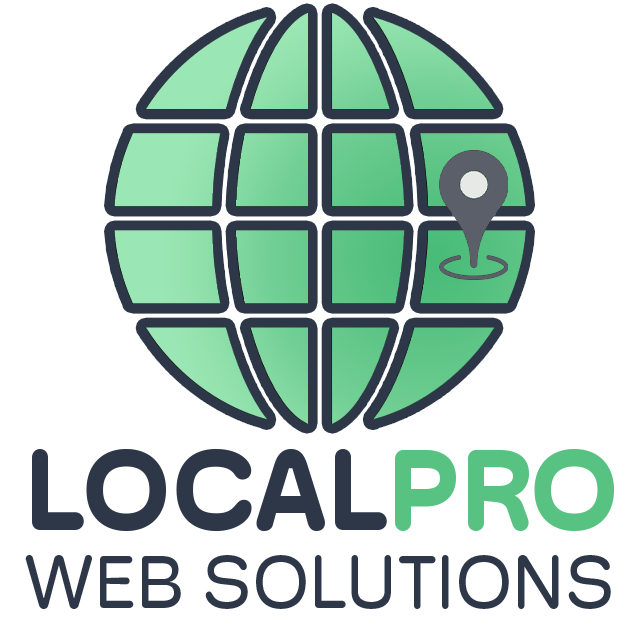
<style>
.page{position:relative;width:640px;height:640px;background:#ffffff}
.page>*{position:absolute;margin:0}
.t1{font:116.1px "HossRound-Bold";color:#2d3748}
.t2{font:116.1px "HossRound-Bold";color:#57c281}
.t3{font:75.6px "HossRound-Regular";color:#2d3748}
</style>
<div class="page">
<p class="t1" style="left:32px;top:448px;width:582px;height:84px">LOCAL<span class="t2">PRO</span></p>
<p class="t3" style="left:25px;top:555px;width:586px;height:54px">WEB SOLUTIONS</p>
</div>
